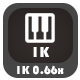
<style>
.page{position:relative;width:80px;height:80px;background:#464646}
.page>*{position:absolute;margin:0}
.t1{font:15px "Bauhaus93";color:#ffffff}
.t2{font:12px "Bauhaus93";color:#ffffff}
</style>
<div class="page">
<p class="t1" style="left:33px;top:47px;width:16px;height:10px">1K</p>
<p class="t2" style="left:17px;top:65px;width:47px;height:10px">1K 0.66x</p>
</div>
